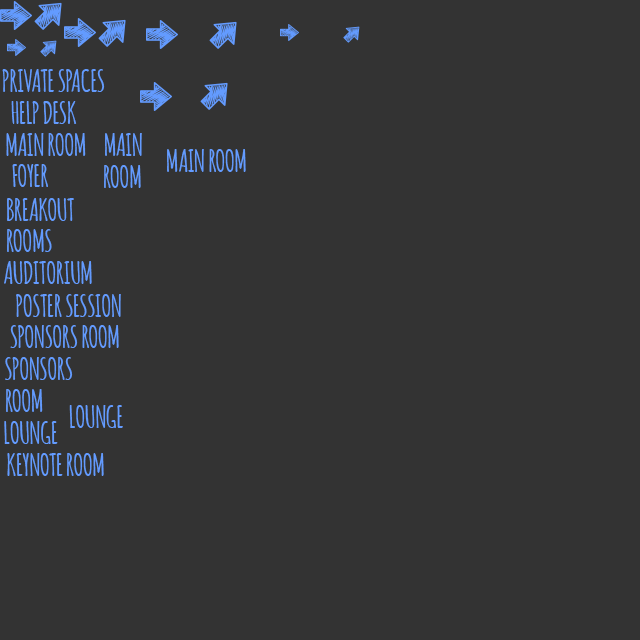
<style>
.page{position:relative;width:640px;height:640px;background:#333333}
.page>*{position:absolute;margin:0}
.t1{font:30px "Amatic-Bold";color:#639bff}
</style>
<div class="page">
<p class="t1" style="left:2px;top:69px;width:103px;height:23px">PRIVATE SPACES</p>
<p class="t1" style="left:11px;top:101px;width:66px;height:23px">HELP DESK</p>
<p class="t1" style="left:6px;top:133px;width:80px;height:23px">MAIN ROOM</p>
<p class="t1" style="left:105px;top:133px;width:37px;height:23px">MAIN</p>
<p class="t1" style="left:167px;top:149px;width:79px;height:23px">MAIN ROOM</p>
<p class="t1" style="left:12px;top:164px;width:36px;height:23px">FOYER</p>
<p class="t1" style="left:104px;top:165px;width:37px;height:23px">ROOM</p>
<p class="t1" style="left:7px;top:198px;width:67px;height:23px">BREAKOUT</p>
<p class="t1" style="left:7px;top:229px;width:45px;height:23px">ROOMS</p>
<p class="t1" style="left:4px;top:261px;width:88px;height:23px">AUDITORIUM</p>
<p class="t1" style="left:16px;top:294px;width:105px;height:23px">POSTER SESSION</p>
<p class="t1" style="left:10px;top:325px;width:109px;height:23px">SPONSORS ROOM</p>
<p class="t1" style="left:5px;top:357px;width:68px;height:23px">SPONSORS</p>
<p class="t1" style="left:6px;top:389px;width:37px;height:23px">ROOM</p>
<p class="t1" style="left:69px;top:405px;width:54px;height:23px">LOUNGE</p>
<p class="t1" style="left:4px;top:421px;width:54px;height:23px">LOUNGE</p>
<p class="t1" style="left:7px;top:453px;width:97px;height:23px">KEYNOTE ROOM</p>
</div>
